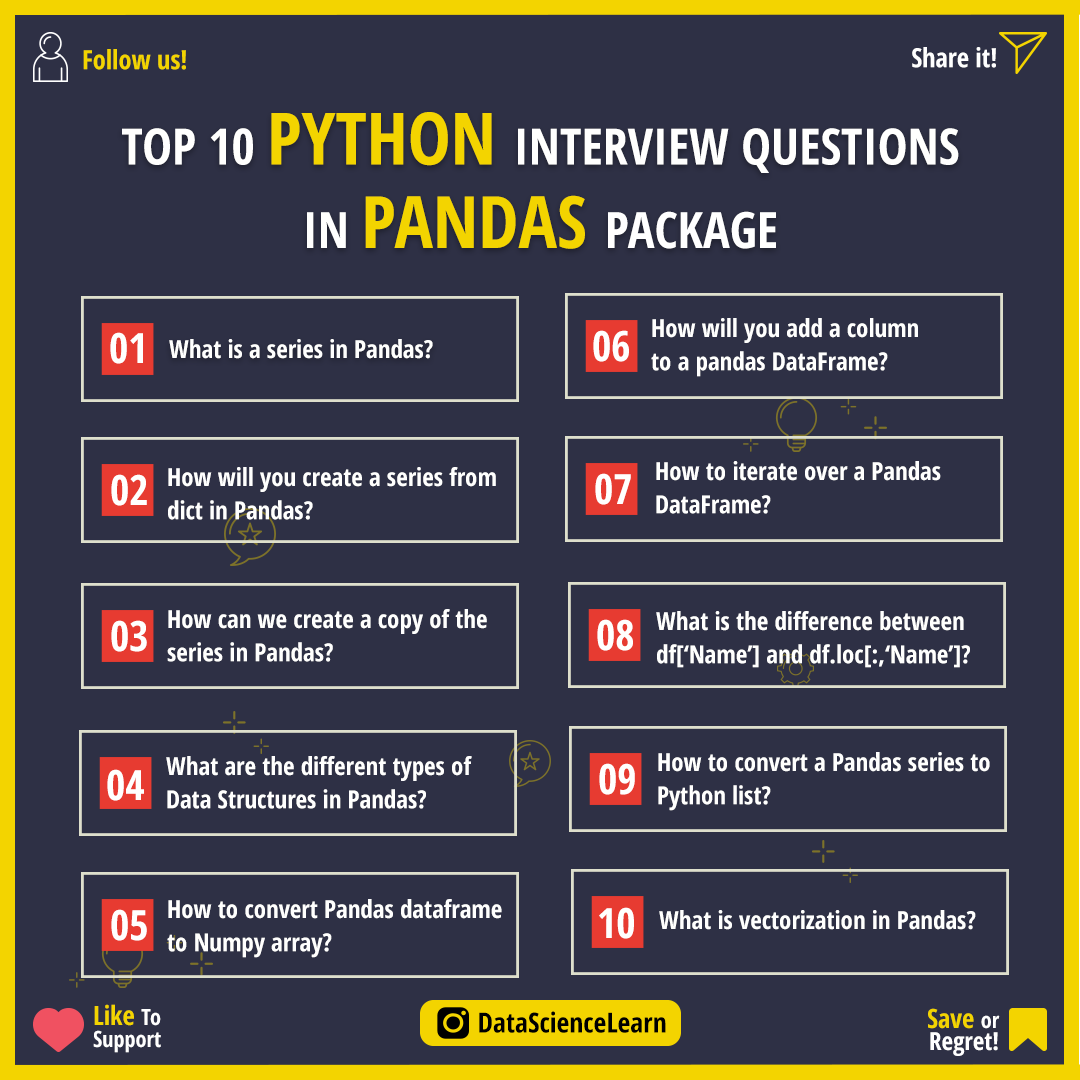
<style>
.page{position:relative;width:1080px;height:1080px;background:#2e3045}
.page>*{position:absolute;margin:0}
.t1{font:26.4px "OpenSans-CondensedBold";color:#f3d400}
.t2{font:26.4px "OpenSans-CondensedBold";color:#ffffff}
.t3{font:50px/72.2px "OpenSans-CondensedBold";color:#fffffe}
.t4{font:72.2px/72.2px "OpenSans-CondensedBold";color:#f3d400}
.t5{font:50px/83.3px "OpenSans-CondensedBold";color:#fffffe}
.t6{font:72.2px/83.3px "OpenSans-CondensedBold";color:#f3d400}
.t7{font:50px/83.3px "OpenSans-CondensedBold";color:#ffffff}
.t8{font:25px/33.3px "OpenSans-CondensedBold";color:#fffffe}
.t9{font:41.7px "OpenSans-CondensedBold";color:#fffffe}
.t10{font:25px "OpenSans-CondensedBold";color:#fffffe}
.t11{font:22.2px/22.2px "OpenSans-CondensedBold";color:#ffffff}
.t12{font:26.4px/22.2px "OpenSans-CondensedBold";color:#f3d400}
.t13{font:27.8px "OpenSans-CondensedBold";color:#000000}
.t14{font:25px/22.2px "OpenSans-CondensedBold";color:#ffffff}
</style>
<div class="page">
<p class="t1" style="left:83px;top:49px;width:103px;height:21px">Follow us!</p>
<p class="t2" style="left:912px;top:47px;width:84px;height:21px">Share it!</p>
<p class="t3" style="left:122px;top:112px;width:837px;height:137px;text-align:center">TOP 10 <span class="t4">PYTHON </span>INTERVIEW QUESTIONS<br><span class="t5">IN </span><span class="t6">PANDAS </span><span class="t7">PACKAGE</span></p>
<p class="t8" style="left:651px;top:318px;width:267px;height:59px">How will you add a column <br>to a pandas DataFrame?</p>
<p class="t9" style="left:110px;top:332px;width:33px;height:32px">01</p>
<p class="t10" style="left:169px;top:339px;width:264px;height:20px">What is a series in Pandas?</p>
<p class="t9" style="left:593px;top:330px;width:36px;height:32px">06</p>
<p class="t8" style="left:656px;top:461px;width:285px;height:53px">How to iterate over a Pandas <br>DataFrame?</p>
<p class="t8" style="left:168px;top:467px;width:328px;height:53px">How will you create a series from <br>dict in Pandas?</p>
<p class="t9" style="left:595px;top:473px;width:36px;height:32px">07</p>
<p class="t9" style="left:111px;top:474px;width:36px;height:32px">02</p>
<p class="t8" style="left:167px;top:609px;width:320px;height:53px">How can we create a copy of the <br>series in Pandas?</p>
<p class="t8" style="left:656px;top:611px;width:314px;height:57px">What is the difference between <br>df[‘Name’] and df.loc[:,‘Name’]?</p>
<p class="t9" style="left:111px;top:620px;width:36px;height:32px">03</p>
<p class="t9" style="left:597px;top:619px;width:36px;height:32px">08</p>
<p class="t8" style="left:166px;top:756px;width:306px;height:53px">What are the different types of <br>Data Structures in Pandas?</p>
<p class="t8" style="left:658px;top:752px;width:332px;height:59px">How to convert a Pandas series to <br>Python list?</p>
<p class="t9" style="left:107px;top:769px;width:37px;height:32px">04</p>
<p class="t9" style="left:599px;top:763px;width:36px;height:32px">09</p>
<p class="t8" style="left:167px;top:899px;width:335px;height:59px">How to convert Pandas dataframe <br>to Numpy array?</p>
<p class="t9" style="left:111px;top:909px;width:36px;height:32px">05</p>
<p class="t9" style="left:599px;top:907px;width:35px;height:32px">10</p>
<p class="t10" style="left:659px;top:910px;width:317px;height:20px">What is vectorization in Pandas?</p>
<p class="t11" style="left:93px;top:1004px;width:68px;height:49px"><span class="t12">Like </span>To<br>Support</p>
<p class="t13" style="left:479px;top:1011px;width:187px;height:22px">DataScienceLearn</p>
<p class="t14" style="left:928px;top:1008px;width:72px;height:48px;text-align:right"><span class="t12">Save </span><span class="t11">or<br></span>Regret!</p>
</div>
